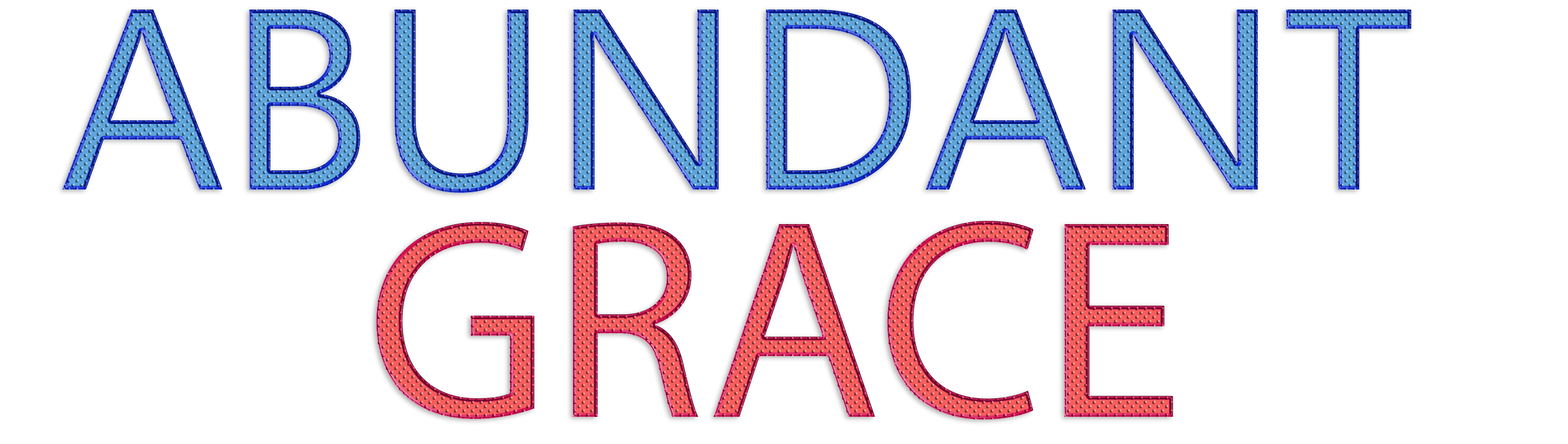
<style>
.page{position:relative;width:1568px;height:444px;background:#ffffff}
.page>*{position:absolute;margin:0}
.t1{font:257.3px "MyanmarText"}
.t2{font:286.1px "MyriadPro-Regular"}
</style>
<div class="page">
<p class="t1" style="left:62px;top:10px;width:1350px;height:183px">ABUNDANT</p>
<p class="t2" style="left:376px;top:221px;width:797px;height:198px">GRACE</p>
</div>
